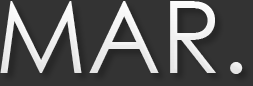
<style>
.page{position:relative;width:253px;height:86px;background:#333333}
.page>*{position:absolute;margin:0}
.t1{font:100px "CenturyGothic";color:#ffffff}
</style>
<div class="page">
<p class="t1" style="left:0px;top:1px;width:243px;height:73px">MAR.</p>
</div>
